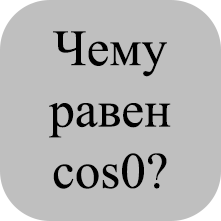
<style>
.page{position:relative;width:221px;height:221px;background:#bfbfbf}
.page>*{position:absolute;margin:0}
.t1{font:51.1px "TimesNewRomanPSMT";color:#000000}
</style>
<div class="page">
<p class="t1" style="left:49px;top:31px;width:122px;height:158px;text-align:center">Чему<br>равен<br>cos0?</p>
</div>
